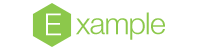
<style>
.page{position:relative;width:200px;height:50px;background:#ffffff}
.page>*{position:absolute;margin:0}
.t1{font:30px "HelveticaNeueLight";letter-spacing:-0.025em;color:#ffffff}
.t2{font:30px "HelveticaNeueLight";letter-spacing:-0.025em;color:#8cc84b}
</style>
<div class="page">
<p class="t1" style="left:46px;top:13px;width:15px;height:23px">E</p>
<p class="t2" style="left:76px;top:12px;width:89px;height:28px">xample</p>
</div>
